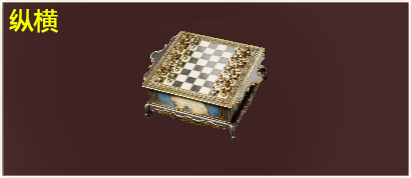
<style>
.page{position:relative;width:411px;height:178px}
.page>*{position:absolute;margin:0}
.t1{font:24px "MicrosoftYaHeiUI";color:#f4ff00;font-weight:bold}
</style>
<div class="page">
<p class="t1" style="left:9px;top:9px;width:49px;height:24px">纵横</p>
</div>
